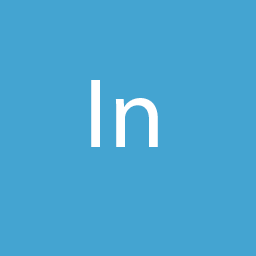
<style>
.page{position:relative;width:256px;height:256px;background:#44a4d1}
.page>*{position:absolute;margin:0}
.t1{font:100px "MyriadPro-Regular";color:#ffffff}
</style>
<div class="page">
<p class="t1" style="left:91px;top:80px;width:67px;height:67px">In</p>
</div>
